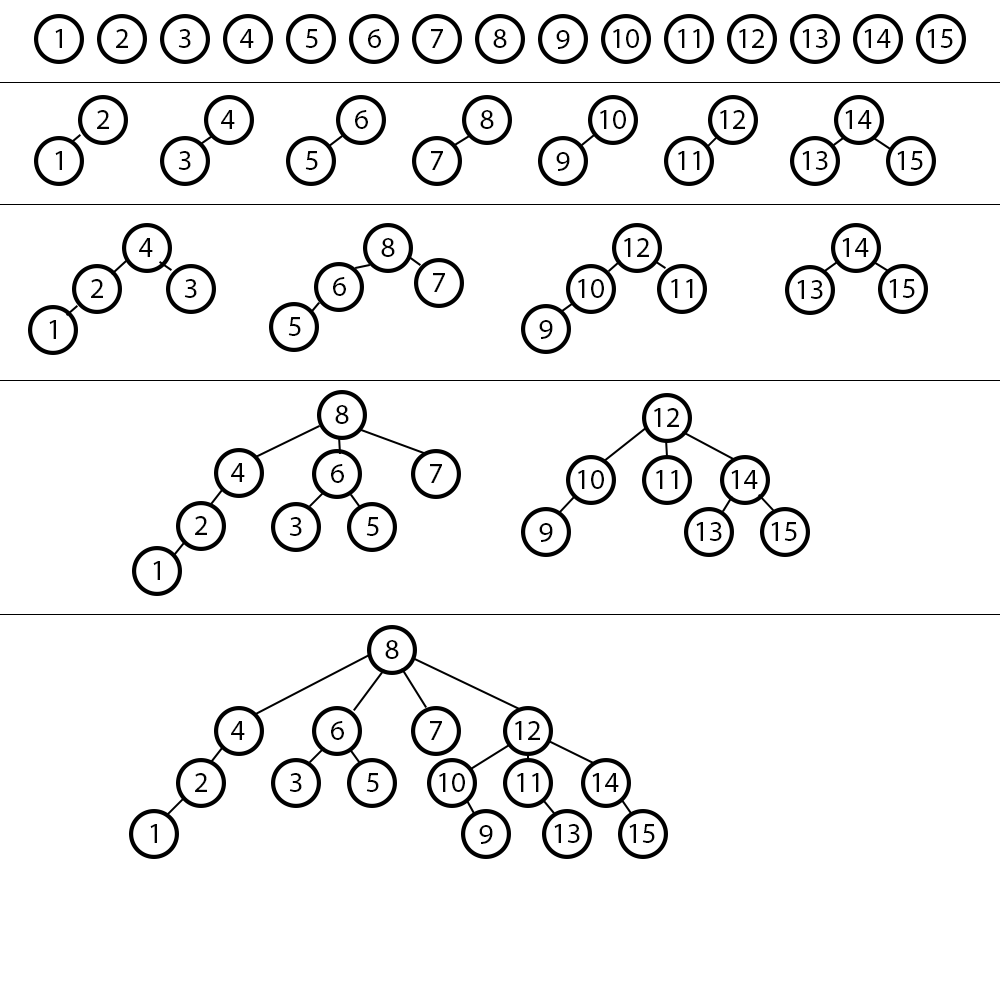
<style>
.page{position:relative;width:1000px;height:1000px;background:#ffffff}
.page>*{position:absolute;margin:0}
.t1{font:29.2px "MyriadPro-Regular";color:#000000}
</style>
<div class="page">
<p class="t1" style="left:55px;top:29px;width:7px;height:19px">1</p>
<p class="t1" style="left:116px;top:29px;width:12px;height:19px">2</p>
<p class="t1" style="left:178px;top:29px;width:13px;height:19px">3</p>
<p class="t1" style="left:240px;top:29px;width:14px;height:19px">4</p>
<p class="t1" style="left:305px;top:29px;width:13px;height:19px">5</p>
<p class="t1" style="left:368px;top:29px;width:13px;height:19px">6</p>
<p class="t1" style="left:431px;top:29px;width:12px;height:19px">7</p>
<p class="t1" style="left:493px;top:29px;width:14px;height:19px">8</p>
<p class="t1" style="left:556px;top:30px;width:14px;height:19px">9</p>
<p class="t1" style="left:613px;top:29px;width:26px;height:19px">10</p>
<p class="t1" style="left:678px;top:29px;width:22px;height:19px">11</p>
<p class="t1" style="left:739px;top:29px;width:25px;height:19px">12</p>
<p class="t1" style="left:802px;top:29px;width:26px;height:19px">13</p>
<p class="t1" style="left:864px;top:29px;width:27px;height:19px">14</p>
<p class="t1" style="left:927px;top:29px;width:26px;height:19px">15</p>
<p class="t1" style="left:97px;top:110px;width:12px;height:19px">2</p>
<p class="t1" style="left:221px;top:110px;width:14px;height:19px">4</p>
<p class="t1" style="left:355px;top:110px;width:13px;height:19px">6</p>
<p class="t1" style="left:480px;top:110px;width:14px;height:19px">8</p>
<p class="t1" style="left:600px;top:110px;width:26px;height:19px">10</p>
<p class="t1" style="left:720px;top:110px;width:25px;height:19px">12</p>
<p class="t1" style="left:845px;top:110px;width:27px;height:19px">14</p>
<p class="t1" style="left:55px;top:151px;width:7px;height:19px">1</p>
<p class="t1" style="left:178px;top:151px;width:13px;height:19px">3</p>
<p class="t1" style="left:305px;top:151px;width:13px;height:19px">5</p>
<p class="t1" style="left:431px;top:151px;width:12px;height:19px">7</p>
<p class="t1" style="left:556px;top:152px;width:14px;height:19px">9</p>
<p class="t1" style="left:678px;top:151px;width:22px;height:19px">11</p>
<p class="t1" style="left:802px;top:151px;width:26px;height:19px">13</p>
<p class="t1" style="left:897px;top:151px;width:26px;height:19px">15</p>
<p class="t1" style="left:139px;top:238px;width:14px;height:19px">4</p>
<p class="t1" style="left:381px;top:238px;width:14px;height:19px">8</p>
<p class="t1" style="left:624px;top:238px;width:25px;height:19px">12</p>
<p class="t1" style="left:842px;top:238px;width:27px;height:19px">14</p>
<p class="t1" style="left:91px;top:279px;width:12px;height:19px">2</p>
<p class="t1" style="left:184px;top:279px;width:13px;height:19px">3</p>
<p class="t1" style="left:333px;top:277px;width:13px;height:19px">6</p>
<p class="t1" style="left:433px;top:273px;width:12px;height:19px">7</p>
<p class="t1" style="left:578px;top:279px;width:26px;height:19px">10</p>
<p class="t1" style="left:671px;top:279px;width:22px;height:19px">11</p>
<p class="t1" style="left:797px;top:280px;width:26px;height:19px">13</p>
<p class="t1" style="left:889px;top:279px;width:26px;height:19px">15</p>
<p class="t1" style="left:288px;top:317px;width:13px;height:19px">5</p>
<p class="t1" style="left:49px;top:320px;width:7px;height:19px">1</p>
<p class="t1" style="left:539px;top:320px;width:14px;height:19px">9</p>
<p class="t1" style="left:335px;top:405px;width:14px;height:19px">8</p>
<p class="t1" style="left:654px;top:408px;width:25px;height:19px">12</p>
<p class="t1" style="left:231px;top:463px;width:14px;height:19px">4</p>
<p class="t1" style="left:331px;top:464px;width:13px;height:19px">6</p>
<p class="t1" style="left:430px;top:464px;width:12px;height:19px">7</p>
<p class="t1" style="left:578px;top:470px;width:26px;height:19px">10</p>
<p class="t1" style="left:656px;top:470px;width:22px;height:19px">11</p>
<p class="t1" style="left:731px;top:470px;width:27px;height:19px">14</p>
<p class="t1" style="left:195px;top:516px;width:12px;height:19px">2</p>
<p class="t1" style="left:289px;top:517px;width:13px;height:19px">3</p>
<p class="t1" style="left:366px;top:517px;width:13px;height:19px">5</p>
<p class="t1" style="left:539px;top:523px;width:14px;height:19px">9</p>
<p class="t1" style="left:696px;top:522px;width:26px;height:19px">13</p>
<p class="t1" style="left:771px;top:522px;width:26px;height:19px">15</p>
<p class="t1" style="left:153px;top:561px;width:7px;height:19px">1</p>
<p class="t1" style="left:385px;top:640px;width:14px;height:19px">8</p>
<p class="t1" style="left:231px;top:721px;width:14px;height:19px">4</p>
<p class="t1" style="left:331px;top:721px;width:13px;height:19px">6</p>
<p class="t1" style="left:430px;top:721px;width:12px;height:19px">7</p>
<p class="t1" style="left:515px;top:721px;width:25px;height:19px">12</p>
<p class="t1" style="left:195px;top:773px;width:12px;height:19px">2</p>
<p class="t1" style="left:289px;top:773px;width:13px;height:19px">3</p>
<p class="t1" style="left:366px;top:773px;width:13px;height:19px">5</p>
<p class="t1" style="left:439px;top:773px;width:26px;height:19px">10</p>
<p class="t1" style="left:517px;top:773px;width:22px;height:19px">11</p>
<p class="t1" style="left:592px;top:773px;width:27px;height:19px">14</p>
<p class="t1" style="left:150px;top:824px;width:7px;height:19px">1</p>
<p class="t1" style="left:479px;top:825px;width:14px;height:19px">9</p>
<p class="t1" style="left:554px;top:824px;width:26px;height:19px">13</p>
<p class="t1" style="left:629px;top:824px;width:26px;height:19px">15</p>
</div>
